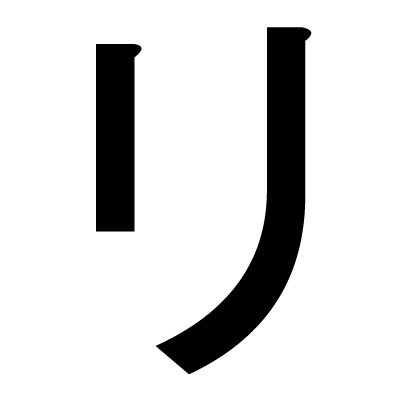
<style>
.page{position:relative;width:400px;height:400px;background:#ffffff}
.page>*{position:absolute;margin:0}
.t1{font:424.8px "MS-PGothic";color:#000000}
</style>
<div class="page">
<p class="t1" style="left:96px;top:27px;width:216px;height:348px">リ</p>
</div>
